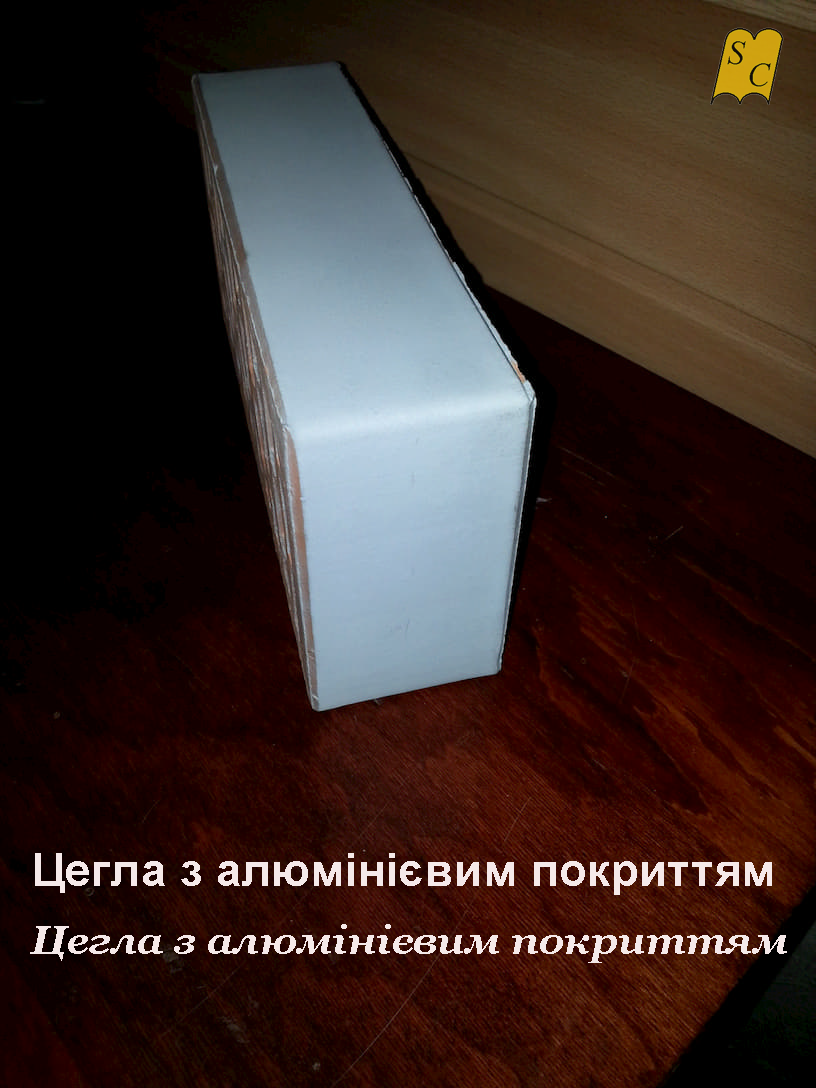
<style>
.page{position:relative;width:816px;height:1088px}
.page>*{position:absolute;margin:0}
.t1{font:46.1px "Arial-BoldMT";letter-spacing:0.01em;color:#f5e9e9}
.t2{font:40px "Georgia-BoldItalic";letter-spacing:0.01em;color:#f5e9e9}
</style>
<div class="page">
<p class="t1" style="left:35px;top:853px;width:737px;height:42px">Цегла з алюмінієвим покриттям</p>
<p class="t2" style="left:30px;top:924px;width:757px;height:39px">Цегла з алюмінієвим покриттям</p>
</div>
